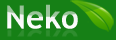
<style>
.page{position:relative;width:116px;height:40px;background:#168016}
.page>*{position:absolute;margin:0}
.t1{font:31.5px "TrebuchetMS";font-weight:bold}
</style>
<div class="page">
<p class="t1" style="left:7px;top:4px;width:71px;height:25px">Neko</p>
</div>
